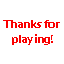
<style>
.page{position:relative;width:64px;height:64px;background:#ffffff}
.page>*{position:absolute;margin:0}
.t1{font:12.3px "Corbel-Bold";color:#fb0000}
</style>
<div class="page">
<p class="t1" style="left:3px;top:20px;width:57px;height:25px;text-align:center">Thanks for <br>playing!</p>
</div>
